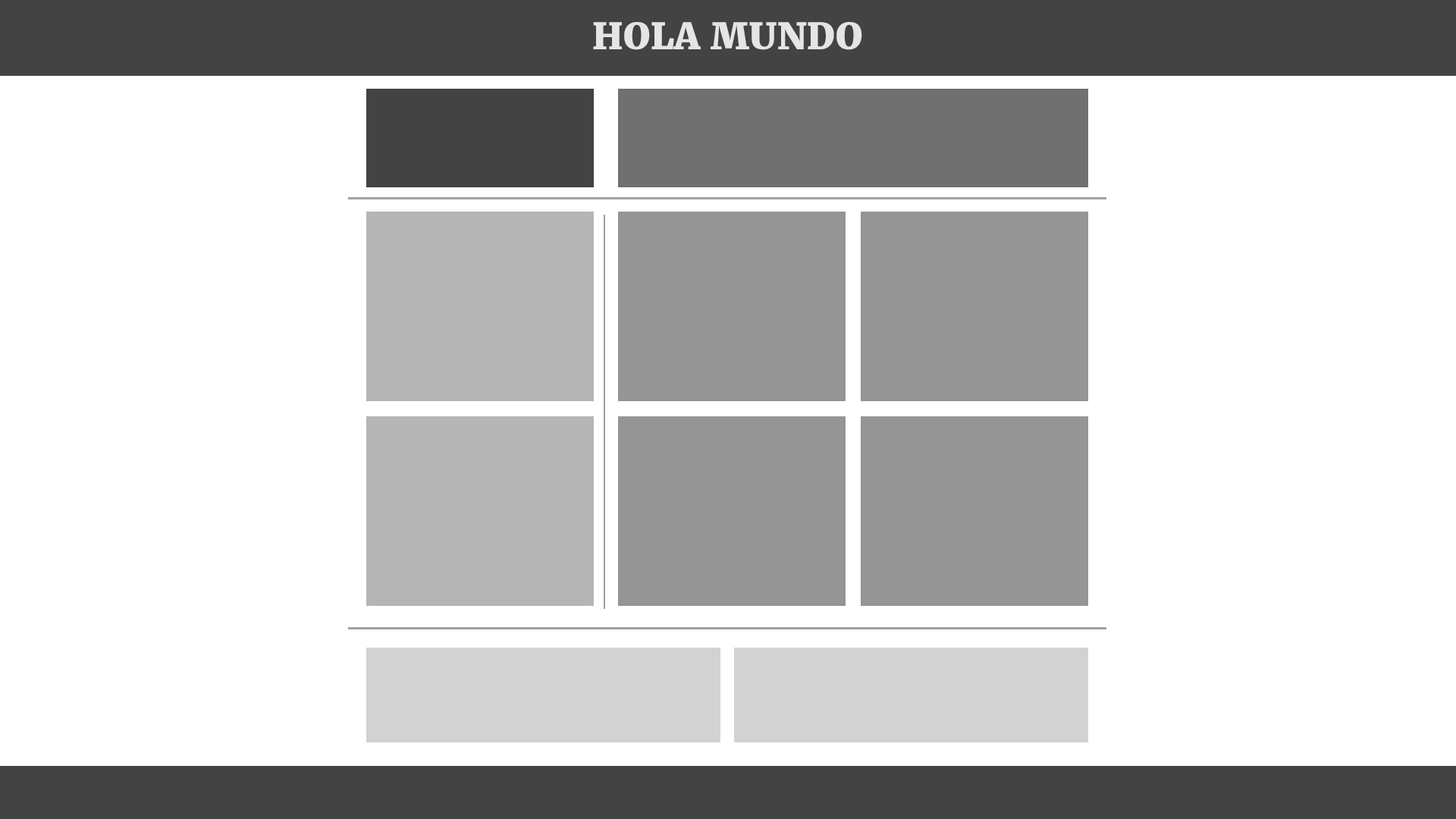
<style>
.page{position:relative;width:1456px;height:819px;background:#ffffff}
.page>*{position:absolute;margin:0}
.t1{font:36.4px "Merriweather-Black";letter-spacing:0.015em;color:#e5e5e5}
</style>
<div class="page">
<p class="t1" style="left:593px;top:22px;width:269px;height:28px">HOLA MUNDO</p>
</div>
